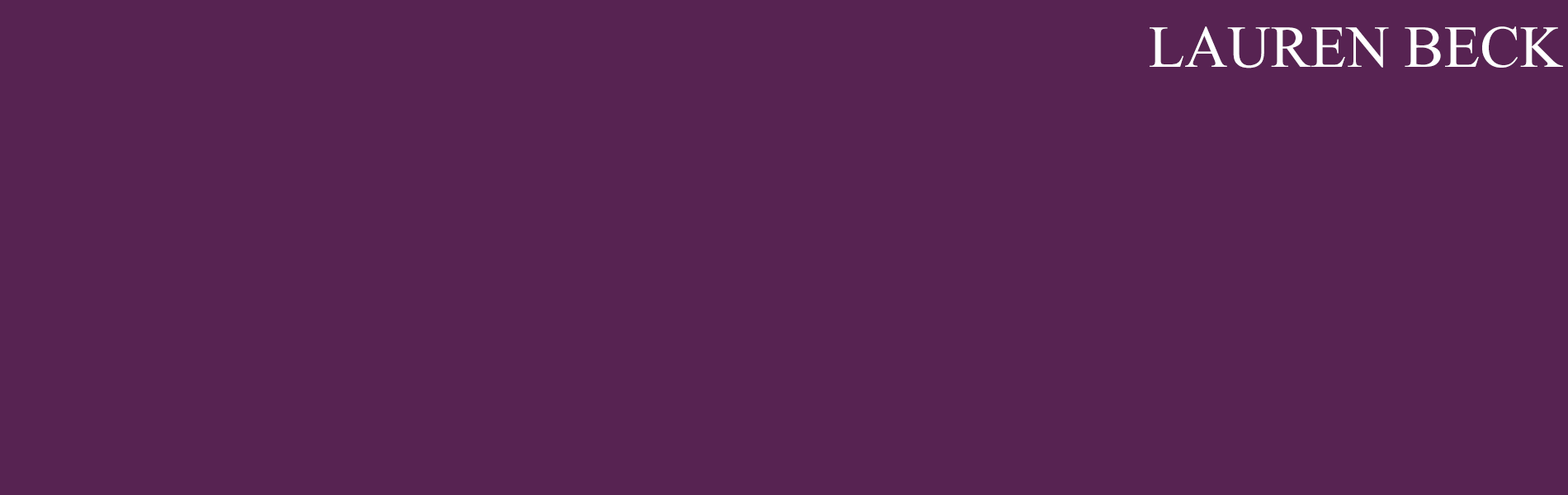
<style>
.page{position:relative;width:1568px;height:495px;background:#572352}
.page>*{position:absolute;margin:0}
.t1{font:59.4px "MongolianBaiti";color:#ffffff;text-transform:uppercase}
</style>
<div class="page">
<p class="t1" style="left:1150px;top:26px;width:413px;height:42px">Lauren Beck</p>
</div>
